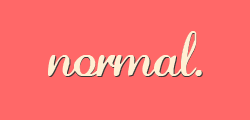
<style>
.page{position:relative;width:250px;height:120px;background:#ff6868}
.page>*{position:absolute;margin:0}
.t1{font:45px "LaurenScript";letter-spacing:-0.025em;color:#fff0d4}
</style>
<div class="page">
<p class="t1" style="left:48px;top:31px;width:154px;height:46px">normal.</p>
<p class="t1" style="left:49px;top:32px;width:154px;height:46px">normal.</p>
</div>
